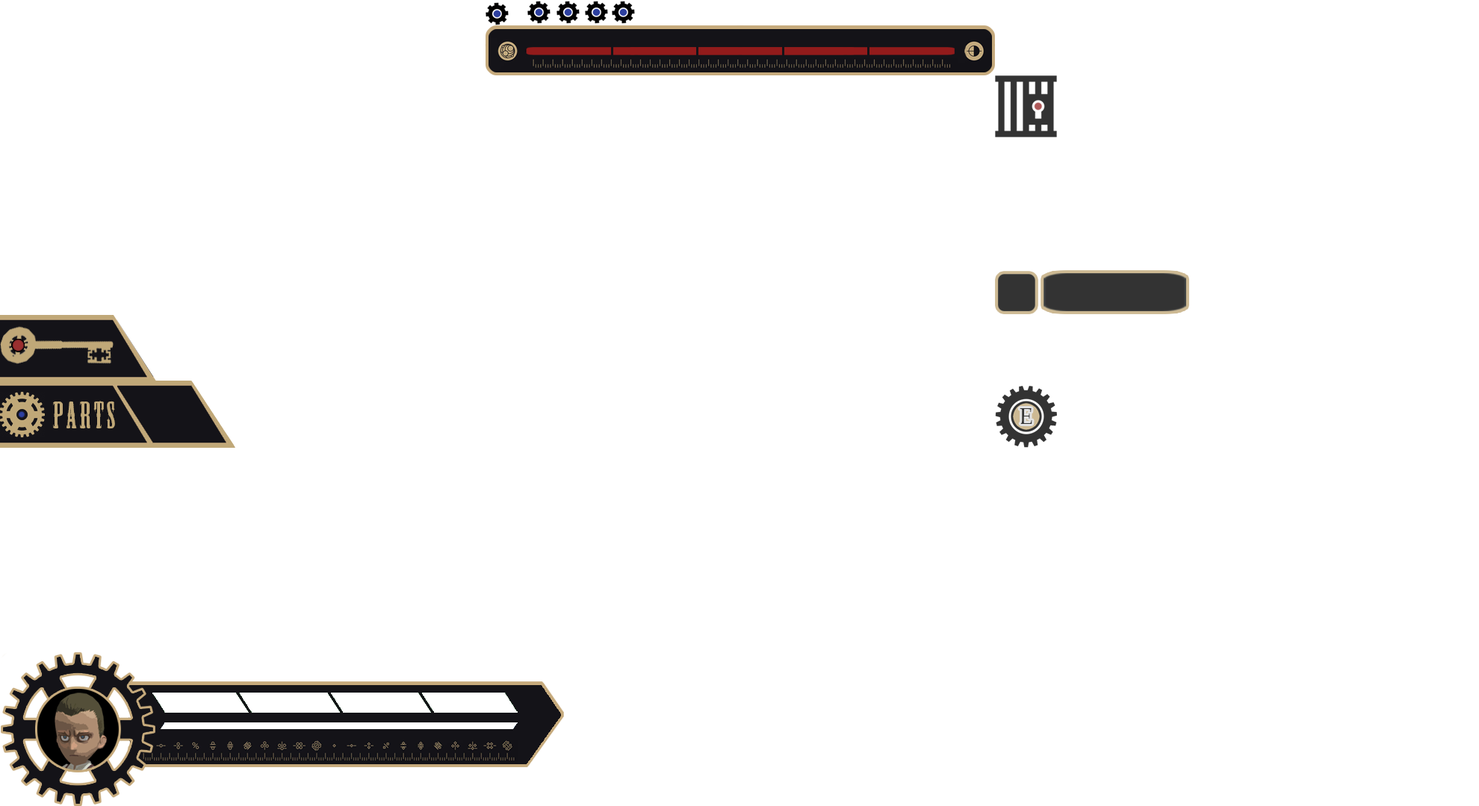
<style>
.page{position:relative;width:1479px;height:806px;background:#ffffff}
.page>*{position:absolute;margin:0}
.t1{font:35.8px "MesquiteStd";letter-spacing:0.1em;color:#c0a878}
.t2{font:22.4px "PalatinoLinotype-Roman";letter-spacing:0.1em;color:#333333}
</style>
<div class="page">
<p class="t1" style="left:53px;top:401px;width:62px;height:28px">Parts</p>
<p class="t2" style="left:1019px;top:408px;width:13px;height:16px">E</p>
</div>
